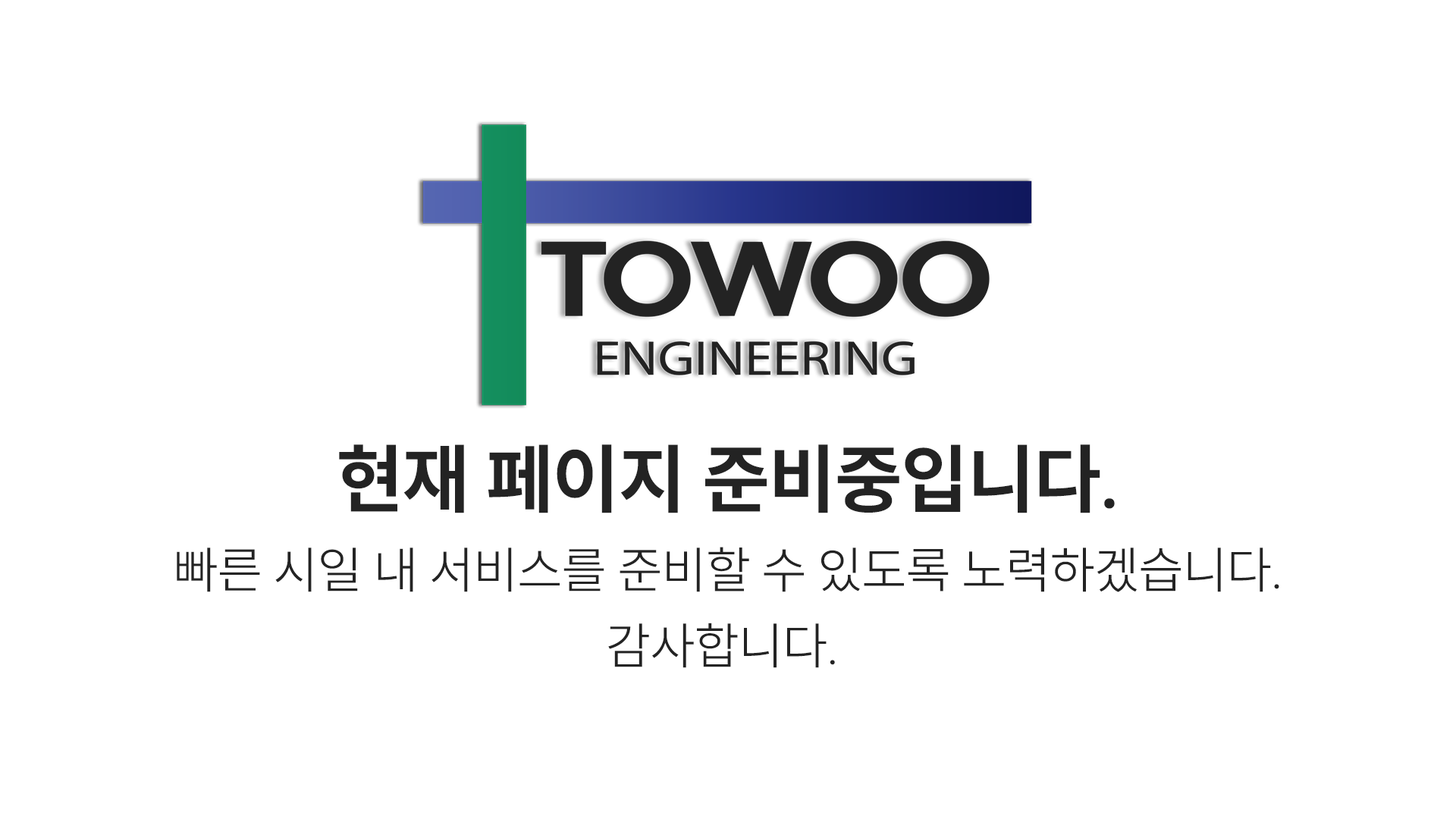
<style>
.page{position:relative;width:1456px;height:819px;background:#ffffff}
.page>*{position:absolute;margin:0}
.t1{font:75.8px "SUITVariable-Bold";color:#232323}
.t2{font:50.6px/75.8px "SUITVariable-Light";color:#232323}
</style>
<div class="page">
<p class="t1" style="left:339px;top:444px;width:776px;height:69px">현재 페이지 준비중입니다.</p>
<p class="t2" style="left:177px;top:547px;width:1102px;height:121px;text-align:center">빠른 시일 내 서비스를 준비할 수 있도록 노력하겠습니다.<br>감사합니다.</p>
</div>
